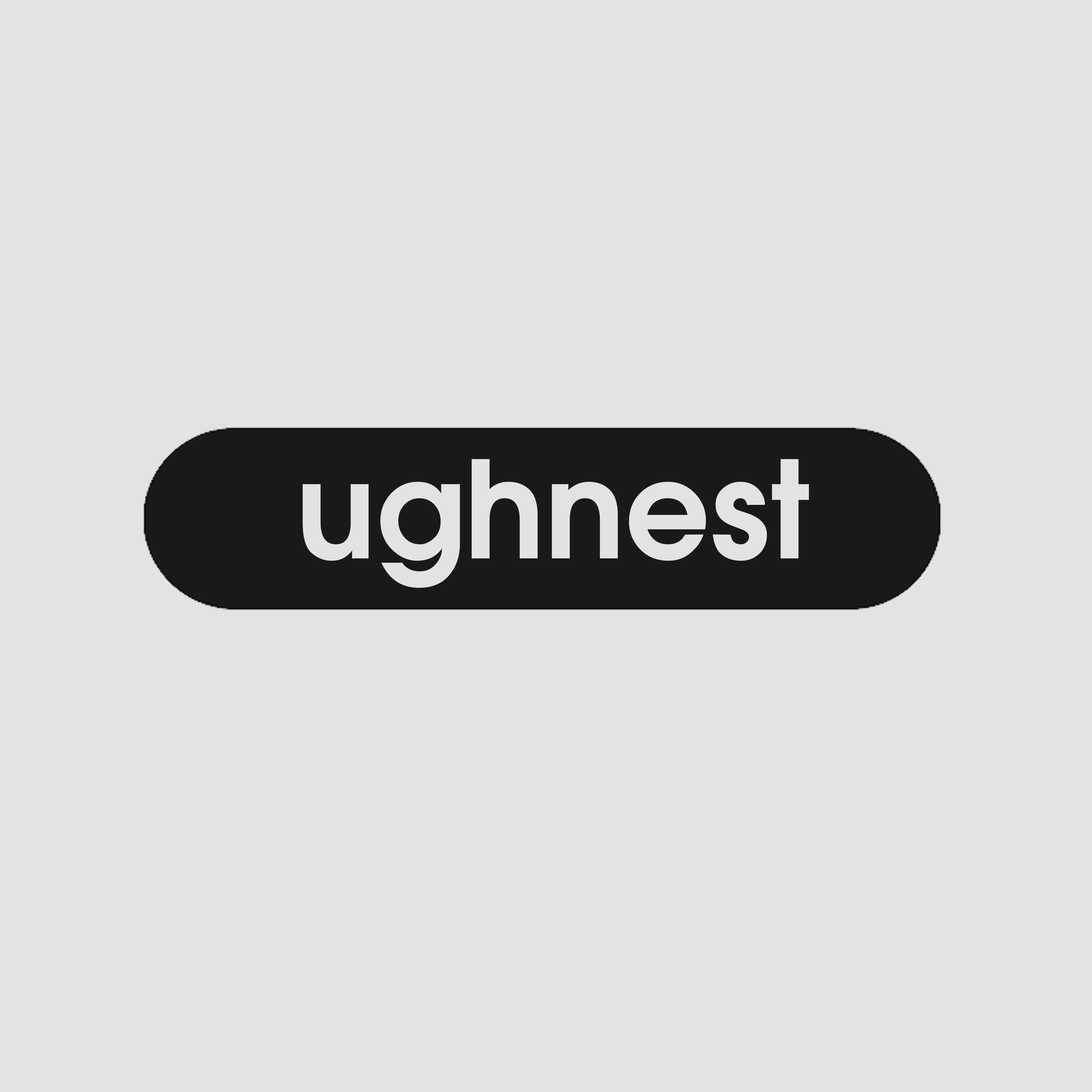
<style>
.page{position:relative;width:1092px;height:1092px;background:#e3e3e3}
.page>*{position:absolute;margin:0}
.t1{font:133.7px "AvantGarde-Demi";color:#e3e3e3}
</style>
<div class="page">
<p class="t1" style="left:302px;top:459px;width:507px;height:129px">ughnest</p>
</div>
